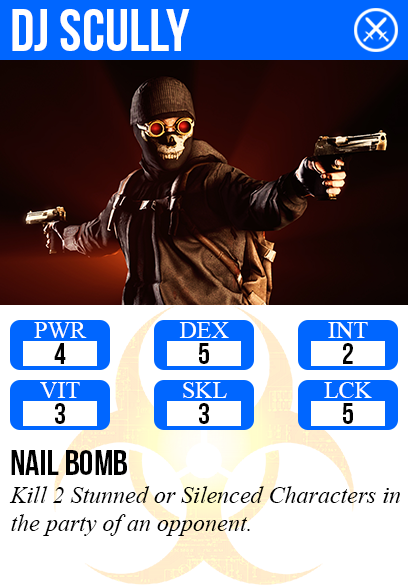
<style>
.page{position:relative;width:408px;height:585px;background:#ffffff}
.page>*{position:absolute;margin:0}
.t1{font:60px "BebasNeue";color:#ffffff}
.t2{font:24px "TimesNewRomanPSMT";color:#ffffff}
.t3{font:30px "BebasNeue";color:#000000}
.t4{font:36px "BebasNeue";color:#000000}
.t5{font:24px "TimesNewRomanPS-ItalicMT";color:#000000}
</style>
<div class="page">
<p class="t1" style="left:12px;top:9px;width:178px;height:42px">dj scully</p>
<p class="t2" style="left:34px;top:322px;width:53px;height:16px">PWR</p>
<p class="t2" style="left:179px;top:322px;width:50px;height:16px">DEX</p>
<p class="t2" style="left:328px;top:322px;width:40px;height:17px">INT</p>
<p class="t3" style="left:54px;top:343px;width:12px;height:21px">4</p>
<p class="t3" style="left:199px;top:343px;width:10px;height:21px">5</p>
<p class="t3" style="left:343px;top:343px;width:10px;height:21px">2</p>
<p class="t2" style="left:40px;top:382px;width:40px;height:16px">VIT</p>
<p class="t2" style="left:183px;top:382px;width:44px;height:16px">SKL</p>
<p class="t2" style="left:324px;top:382px;width:48px;height:16px">LCK</p>
<p class="t3" style="left:55px;top:403px;width:10px;height:21px">3</p>
<p class="t3" style="left:199px;top:403px;width:10px;height:21px">3</p>
<p class="t3" style="left:343px;top:403px;width:10px;height:21px">5</p>
<p class="t4" style="left:11px;top:450px;width:116px;height:25px">nail bomb</p>
<p class="t5" style="left:9px;top:486px;width:391px;height:50px">Kill 2 Stunned or Silenced Characters in<br>the party of an opponent.</p>
</div>
